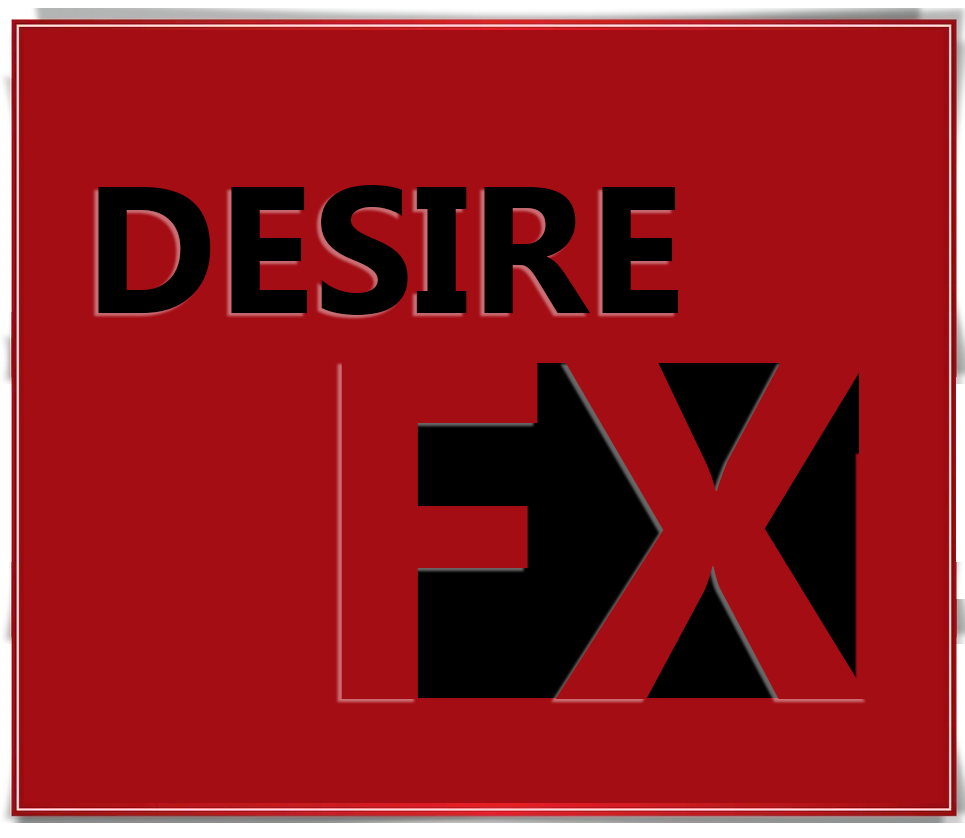
<style>
.page{position:relative;width:965px;height:838px;background:#a50d15}
.page>*{position:absolute;margin:0}
.t1{font:180px "Gadugi-Bold";color:#000000}
.t2{font:482.7px "Gadugi-Bold";color:#a50d15}
</style>
<div class="page">
<p class="t1" style="left:98px;top:185px;width:580px;height:130px">DESIRE</p>
<p class="t2" style="left:341px;top:361px;width:528px;height:338px">FX</p>
</div>
